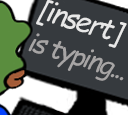
<style>
.page{position:relative;width:128px;height:115px;background:#363a3e}
.page>*{position:absolute;margin:0}
.t1{font:28.6px "ComicSansMS-Italic";letter-spacing:-0.074em;color:#e8e8e8}
.t2{font:26.6px "ComicSansMS-Italic";letter-spacing:-0.074em;color:#a7a5a5}
</style>
<div class="page">
<p class="t1" style="left:36px;top:0px;width:91px;height:48px;rotate:17deg">[insert]</p>
<p class="t2" style="left:28px;top:33px;width:96px;height:48px;rotate:17deg"><span class="t1"><br></span>is typing...</p>
</div>
